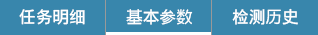
<style>
.page{position:relative;width:318px;height:35px;background:#3886ac}
.page>*{position:absolute;margin:0}
.t1{font:16.7px "LiHeiPro";color:#ffffff}
</style>
<div class="page">
<p class="t1" style="left:19px;top:9px;width:66px;height:16px">任务明细</p>
<p class="t1" style="left:126px;top:9px;width:67px;height:16px">基本参数</p>
<p class="t1" style="left:232px;top:8px;width:66px;height:17px">检测历史</p>
</div>
